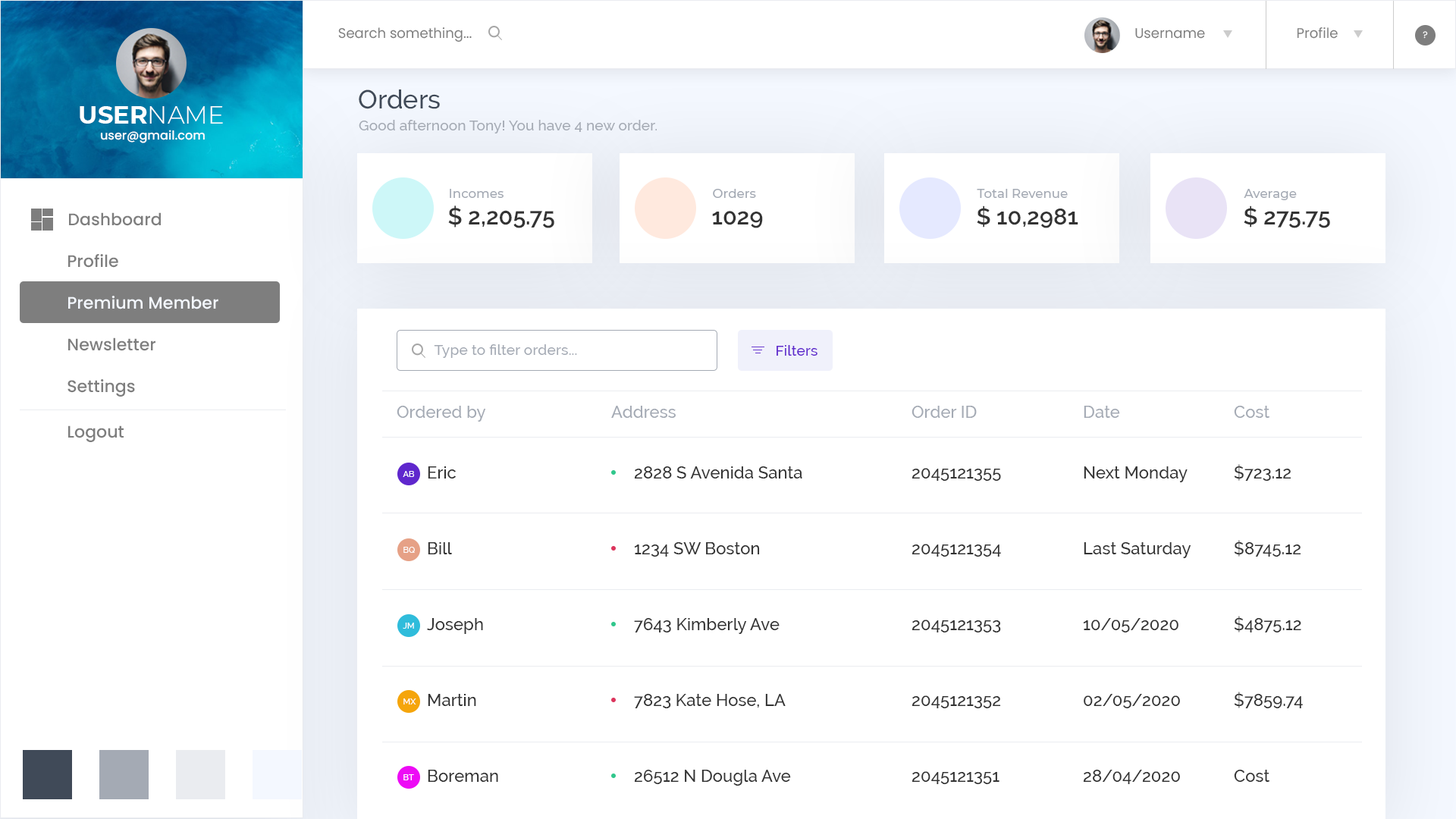
<style>
.page{position:relative;width:1456px;height:819px;background:#ffffff}
.page>*{position:absolute;margin:0}
.t1{font:13.9px "Poppins-Regular";color:#7e7e7e}
.t2{font:9.2px "Poppins-Regular";color:#fdfdfd}
.t3{font:26px "Raleway-Medium";color:#404a58}
.t4{font:24.4px "Montserrat-Bold";color:#ffffff}
.t5{font:24.4px "Montserrat-Light";color:#ffffff}
.t6{font:14.6px "Raleway-Medium";color:#a4aab4}
.t7{font:12.2px "Poppins-Medium";color:#ffffff}
.t8{font:12.6px "Montserrat-Medium";color:#a4aab4}
.t9{font:23.2px "Raleway-SemiBold";color:#333333}
.t10{font:22.6px "Raleway-SemiBold";color:#333333}
.t11{font:16.7px "Poppins-Medium";color:#7e7e7e}
.t12{font:16.7px "Poppins-Medium";color:#f4f8ff}
.t13{font:14.7px "Raleway-Medium";color:#a4aab4}
.t14{font:14.7px "Raleway-Medium";color:#5f27cd}
.t15{font:16.9px "Raleway-Medium";color:#a4aab4}
.t16{font:8.4px "Raleway-Medium";color:#ffffff}
.t17{font:16.9px "Raleway-Medium";color:#333333}
</style>
<div class="page">
<p class="t1" style="left:338px;top:27px;width:134px;height:15px">Search something...</p>
<p class="t1" style="left:1135px;top:28px;width:70px;height:11px">Username</p>
<p class="t1" style="left:1297px;top:27px;width:41px;height:12px">Profile</p>
<p class="t2" style="left:1423px;top:31px;width:5px;height:8px">?</p>
<p class="t3" style="left:359px;top:89px;width:81px;height:20px">Orders</p>
<p class="t4" style="left:80px;top:106px;width:143px;height:18px">USER<span class="t5">NAME</span></p>
<p class="t6" style="left:359px;top:120px;width:298px;height:13px">Good afternoon Tony! You have 4 new order.</p>
<p class="t7" style="left:100px;top:130px;width:105px;height:13px">user@gmail.com</p>
<p class="t8" style="left:450px;top:189px;width:54px;height:9px">Incomes</p>
<p class="t8" style="left:713px;top:189px;width:43px;height:9px">Orders</p>
<p class="t8" style="left:977px;top:189px;width:91px;height:9px">Total Revenue</p>
<p class="t8" style="left:1244px;top:189px;width:53px;height:11px">Average</p>
<p class="t9" style="left:448px;top:206px;width:106px;height:22px">$ 2,205.75</p>
<p class="t10" style="left:977px;top:206px;width:101px;height:22px">$ 10,2981</p>
<p class="t10" style="left:1244px;top:206px;width:86px;height:22px">$ 275.75</p>
<p class="t11" style="left:69px;top:212px;width:92px;height:14px">Dashboard</p>
<p class="t10" style="left:712px;top:211px;width:51px;height:17px">1029</p>
<p class="t11" style="left:68px;top:254px;width:50px;height:14px">Profile</p>
<p class="t12" style="left:68px;top:296px;width:150px;height:13px">Premium Member</p>
<p class="t11" style="left:68px;top:337px;width:87px;height:14px">Newsletter</p>
<p class="t13" style="left:434px;top:344px;width:143px;height:14px">Type to filter orders...</p>
<p class="t14" style="left:777px;top:345px;width:40px;height:11px">Filters</p>
<p class="t11" style="left:67px;top:379px;width:68px;height:18px">Settings</p>
<p class="t15" style="left:397px;top:406px;width:89px;height:16px">Ordered by</p>
<p class="t15" style="left:611px;top:406px;width:65px;height:12px">Address</p>
<p class="t15" style="left:912px;top:406px;width:65px;height:12px">Order ID</p>
<p class="t15" style="left:1084px;top:406px;width:36px;height:12px">Date</p>
<p class="t15" style="left:1234px;top:406px;width:35px;height:12px">Cost</p>
<p class="t11" style="left:68px;top:425px;width:56px;height:17px">Logout</p>
<p class="t16" style="left:403px;top:471px;width:12px;height:6px">AB</p>
<p class="t17" style="left:428px;top:466px;width:28px;height:13px">Eric</p>
<p class="t17" style="left:634px;top:466px;width:168px;height:13px">2828 S Avenida Santa</p>
<p class="t17" style="left:912px;top:468px;width:89px;height:13px">2045121355</p>
<p class="t17" style="left:1084px;top:466px;width:104px;height:16px">Next Monday</p>
<p class="t17" style="left:1234px;top:464px;width:57px;height:17px">$723.12</p>
<p class="t17" style="left:428px;top:542px;width:24px;height:12px">Bill</p>
<p class="t17" style="left:634px;top:542px;width:126px;height:15px">1234 SW Boston</p>
<p class="t17" style="left:912px;top:544px;width:89px;height:13px">2045121354</p>
<p class="t17" style="left:1084px;top:542px;width:107px;height:16px">Last Saturday</p>
<p class="t17" style="left:1234px;top:540px;width:67px;height:17px">$8745.12</p>
<p class="t16" style="left:403px;top:547px;width:12px;height:6px">BQ</p>
<p class="t17" style="left:1234px;top:616px;width:67px;height:16px">$4875.12</p>
<p class="t16" style="left:403px;top:623px;width:11px;height:6px">JM</p>
<p class="t17" style="left:427px;top:618px;width:56px;height:16px">Joseph</p>
<p class="t17" style="left:634px;top:618px;width:146px;height:16px">7643 Kimberly Ave</p>
<p class="t17" style="left:912px;top:620px;width:89px;height:12px">2045121353</p>
<p class="t17" style="left:1083px;top:618px;width:95px;height:14px">10/05/2020</p>
<p class="t16" style="left:403px;top:698px;width:13px;height:6px">MX</p>
<p class="t17" style="left:428px;top:694px;width:48px;height:12px">Martin</p>
<p class="t17" style="left:634px;top:694px;width:152px;height:14px">7823 Kate Hose, LA</p>
<p class="t17" style="left:912px;top:695px;width:89px;height:13px">2045121352</p>
<p class="t17" style="left:1084px;top:694px;width:96px;height:14px">02/05/2020</p>
<p class="t17" style="left:1234px;top:692px;width:69px;height:16px">$7859.74</p>
<p class="t17" style="left:428px;top:770px;width:70px;height:12px">Boreman</p>
<p class="t17" style="left:634px;top:770px;width:157px;height:16px">26512 N Dougla Ave</p>
<p class="t17" style="left:912px;top:771px;width:87px;height:13px">2045121351</p>
<p class="t17" style="left:1083px;top:770px;width:97px;height:14px">28/04/2020</p>
<p class="t17" style="left:1234px;top:770px;width:35px;height:12px">Cost</p>
<p class="t16" style="left:403px;top:774px;width:11px;height:6px">BT</p>
</div>
